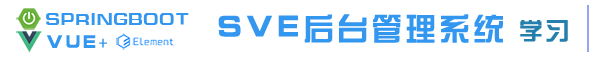
<style>
.page{position:relative;width:600px;height:60px;background:#ffffff}
.page>*{position:absolute;margin:0}
.t1{font:18.6px "ç»å¸ç»¼èºä½ç®-regular";color:#3397ef;text-transform:uppercase}
.t2{font:31px "ç»å¸ç»¼èºä½ç®-regular";letter-spacing:0.1em;color:#3397ef;text-transform:uppercase}
.t3{font:24px "ç»å¸ç»¼èºä½ç®-regular";letter-spacing:0.1em;color:#257fad;text-transform:uppercase}
.t4{font:18.6px "ç»å¸ç»¼èºä½ç®-regular";letter-spacing:0.1em;color:#3397ef;text-transform:uppercase}
</style>
<div class="page">
<p class="t1" style="left:46px;top:13px;width:143px;height:12px">springboot</p>
<p class="t2" style="left:218px;top:14px;width:285px;height:29px">SVE后台管理系统</p>
<p class="t3" style="left:520px;top:20px;width:48px;height:22px">学习</p>
<p class="t4" style="left:47px;top:35px;width:60px;height:13px">VUE+</p>
</div>
